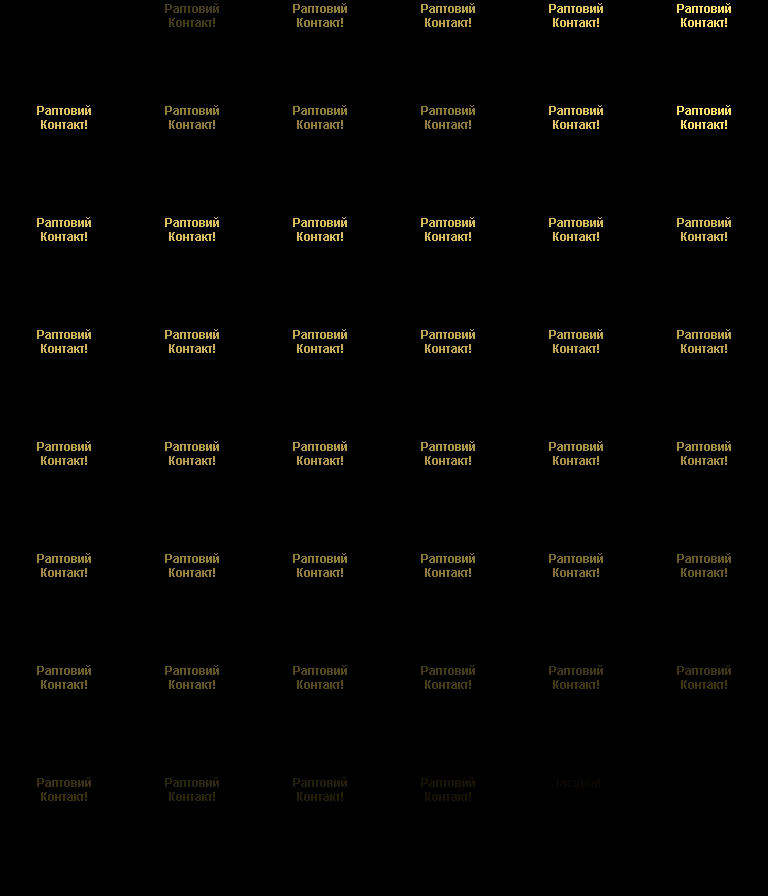
<style>
.page{position:relative;width:768px;height:896px;background:#000000}
.page>*{position:absolute;margin:0}
.t1{font:12px "Arial-BoldMT";color:#443b1a}
.t2{font:12px "Arial-BoldMT";color:#917e3f}
.t3{font:12px "Arial-BoldMT";color:#b8a051}
.t4{font:12px "Arial-BoldMT";color:#e1c465}
.t5{font:12px "Arial-BoldMT";color:#ffdf74}
.t6{font:12px "Arial-BoldMT";color:#ddc164}
.t7{font:12px "Arial-BoldMT";color:#8f7d3e}
.t8{font:12px "Arial-BoldMT";color:#8d7a3d}
.t9{font:12px "Arial-BoldMT";color:#dbbf63}
.t10{font:12px "Arial-BoldMT";color:#dabe62}
.t11{font:12px "Arial-BoldMT";color:#d7bc61}
.t12{font:12px "Arial-BoldMT";color:#d6bb60}
.t13{font:12px "Arial-BoldMT";color:#d4b95f}
.t14{font:12px "Arial-BoldMT";color:#d2b85e}
.t15{font:12px "Arial-BoldMT";color:#cdb35c}
.t16{font:12px "Arial-BoldMT";color:#c7ad59}
.t17{font:12px "Arial-BoldMT";color:#c3aa57}
.t18{font:12px "Arial-BoldMT";color:#bfa755}
.t19{font:12px "Arial-BoldMT";color:#bea654}
.t20{font:12px "Arial-BoldMT";color:#bba353}
.t21{font:12px "Arial-BoldMT";color:#b49d50}
.t22{font:12px "Arial-BoldMT";color:#b0994e}
.t23{font:12px "Arial-BoldMT";color:#ac964c}
.t24{font:12px "Arial-BoldMT";color:#a8924a}
.t25{font:12px "Arial-BoldMT";color:#a38e48}
.t26{font:12px "Arial-BoldMT";color:#9d8844}
.t27{font:12px "Arial-BoldMT";color:#948140}
.t28{font:12px "Arial-BoldMT";color:#8a783b}
.t29{font:12px "Arial-BoldMT";color:#7e6e36}
.t30{font:12px "Arial-BoldMT";color:#67592a}
.t31{font:12px "Arial-BoldMT";color:#6c5e2d}
.t32{font:12px "Arial-BoldMT";color:#615428}
.t33{font:12px "Arial-BoldMT";color:#544821}
.t34{font:12px "Arial-BoldMT";color:#403718}
.t35{font:12px "Arial-BoldMT";color:#3d3416}
.t36{font:12px "Arial-BoldMT";color:#393014}
.t37{font:12px "Arial-BoldMT";color:#2c250e}
.t38{font:12px "Arial-BoldMT";color:#231d09}
.t39{font:12px "Arial-BoldMT";color:#181305}
.t40{font:12px "Arial-BoldMT";color:#0b0802}
</style>
<div class="page">
<p class="t1" style="left:165px;top:3px;width:54px;height:24px;text-align:center">Раптовий<br>Контакт!</p>
<p class="t2" style="left:293px;top:3px;width:54px;height:24px;text-align:center">Раптовий<br>Контакт!</p>
<p class="t3" style="left:421px;top:3px;width:54px;height:24px;text-align:center">Раптовий<br>Контакт!</p>
<p class="t4" style="left:549px;top:3px;width:54px;height:24px;text-align:center">Раптовий<br>Контакт!</p>
<p class="t5" style="left:677px;top:3px;width:54px;height:24px;text-align:center">Раптовий<br>Контакт!</p>
<p class="t6" style="left:37px;top:105px;width:54px;height:24px;text-align:center">Раптовий<br>Контакт!</p>
<p class="t7" style="left:165px;top:105px;width:54px;height:24px;text-align:center">Раптовий<br>Контакт!</p>
<p class="t7" style="left:293px;top:105px;width:54px;height:24px;text-align:center">Раптовий<br>Контакт!</p>
<p class="t8" style="left:421px;top:105px;width:54px;height:24px;text-align:center">Раптовий<br>Контакт!</p>
<p class="t6" style="left:549px;top:105px;width:54px;height:24px;text-align:center">Раптовий<br>Контакт!</p>
<p class="t5" style="left:677px;top:105px;width:54px;height:24px;text-align:center">Раптовий<br>Контакт!</p>
<p class="t9" style="left:37px;top:217px;width:54px;height:24px;text-align:center">Раптовий<br>Контакт!</p>
<p class="t10" style="left:165px;top:217px;width:54px;height:24px;text-align:center">Раптовий<br>Контакт!</p>
<p class="t11" style="left:293px;top:217px;width:54px;height:24px;text-align:center">Раптовий<br>Контакт!</p>
<p class="t12" style="left:421px;top:217px;width:54px;height:24px;text-align:center">Раптовий<br>Контакт!</p>
<p class="t13" style="left:549px;top:217px;width:54px;height:24px;text-align:center">Раптовий<br>Контакт!</p>
<p class="t14" style="left:677px;top:217px;width:54px;height:24px;text-align:center">Раптовий<br>Контакт!</p>
<p class="t15" style="left:37px;top:329px;width:54px;height:24px;text-align:center">Раптовий<br>Контакт!</p>
<p class="t16" style="left:165px;top:329px;width:54px;height:24px;text-align:center">Раптовий<br>Контакт!</p>
<p class="t17" style="left:293px;top:329px;width:54px;height:24px;text-align:center">Раптовий<br>Контакт!</p>
<p class="t18" style="left:421px;top:329px;width:54px;height:24px;text-align:center">Раптовий<br>Контакт!</p>
<p class="t19" style="left:549px;top:329px;width:54px;height:24px;text-align:center">Раптовий<br>Контакт!</p>
<p class="t20" style="left:677px;top:329px;width:54px;height:24px;text-align:center">Раптовий<br>Контакт!</p>
<p class="t3" style="left:37px;top:441px;width:54px;height:24px;text-align:center">Раптовий<br>Контакт!</p>
<p class="t21" style="left:165px;top:441px;width:54px;height:24px;text-align:center">Раптовий<br>Контакт!</p>
<p class="t22" style="left:293px;top:441px;width:54px;height:24px;text-align:center">Раптовий<br>Контакт!</p>
<p class="t23" style="left:421px;top:441px;width:54px;height:24px;text-align:center">Раптовий<br>Контакт!</p>
<p class="t24" style="left:549px;top:441px;width:54px;height:24px;text-align:center">Раптовий<br>Контакт!</p>
<p class="t25" style="left:677px;top:441px;width:54px;height:24px;text-align:center">Раптовий<br>Контакт!</p>
<p class="t26" style="left:37px;top:553px;width:54px;height:24px;text-align:center">Раптовий<br>Контакт!</p>
<p class="t27" style="left:165px;top:553px;width:54px;height:24px;text-align:center">Раптовий<br>Контакт!</p>
<p class="t7" style="left:293px;top:553px;width:54px;height:24px;text-align:center">Раптовий<br>Контакт!</p>
<p class="t28" style="left:421px;top:553px;width:54px;height:24px;text-align:center">Раптовий<br>Контакт!</p>
<p class="t29" style="left:549px;top:553px;width:54px;height:24px;text-align:center">Раптовий<br>Контакт!</p>
<p class="t30" style="left:677px;top:553px;width:54px;height:24px;text-align:center">Раптовий<br>Контакт!</p>
<p class="t31" style="left:37px;top:665px;width:54px;height:24px;text-align:center">Раптовий<br>Контакт!</p>
<p class="t32" style="left:165px;top:665px;width:54px;height:24px;text-align:center">Раптовий<br>Контакт!</p>
<p class="t33" style="left:293px;top:665px;width:54px;height:24px;text-align:center">Раптовий<br>Контакт!</p>
<p class="t1" style="left:421px;top:665px;width:54px;height:24px;text-align:center">Раптовий<br>Контакт!</p>
<p class="t34" style="left:549px;top:665px;width:54px;height:24px;text-align:center">Раптовий<br>Контакт!</p>
<p class="t35" style="left:677px;top:665px;width:54px;height:24px;text-align:center">Раптовий<br>Контакт!</p>
<p class="t36" style="left:37px;top:777px;width:54px;height:24px;text-align:center">Раптовий<br>Контакт!</p>
<p class="t37" style="left:165px;top:777px;width:54px;height:24px;text-align:center">Раптовий<br>Контакт!</p>
<p class="t38" style="left:293px;top:777px;width:54px;height:24px;text-align:center">Раптовий<br>Контакт!</p>
<p class="t39" style="left:421px;top:777px;width:54px;height:24px;text-align:center">Раптовий<br>Контакт!</p>
<p class="t40" style="left:552px;top:778px;width:48px;height:11px">Засідка!</p>
</div>
